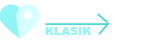
<style>
.page{position:relative;width:159px;height:43px;background:#ffffff}
.page>*{position:absolute;margin:0}
.t1{font:11px "Arial-Black";color:#93f4f5}
</style>
<div class="page">
<p class="t1" style="left:45px;top:27px;width:47px;height:8px">KLASIK</p>
</div>
